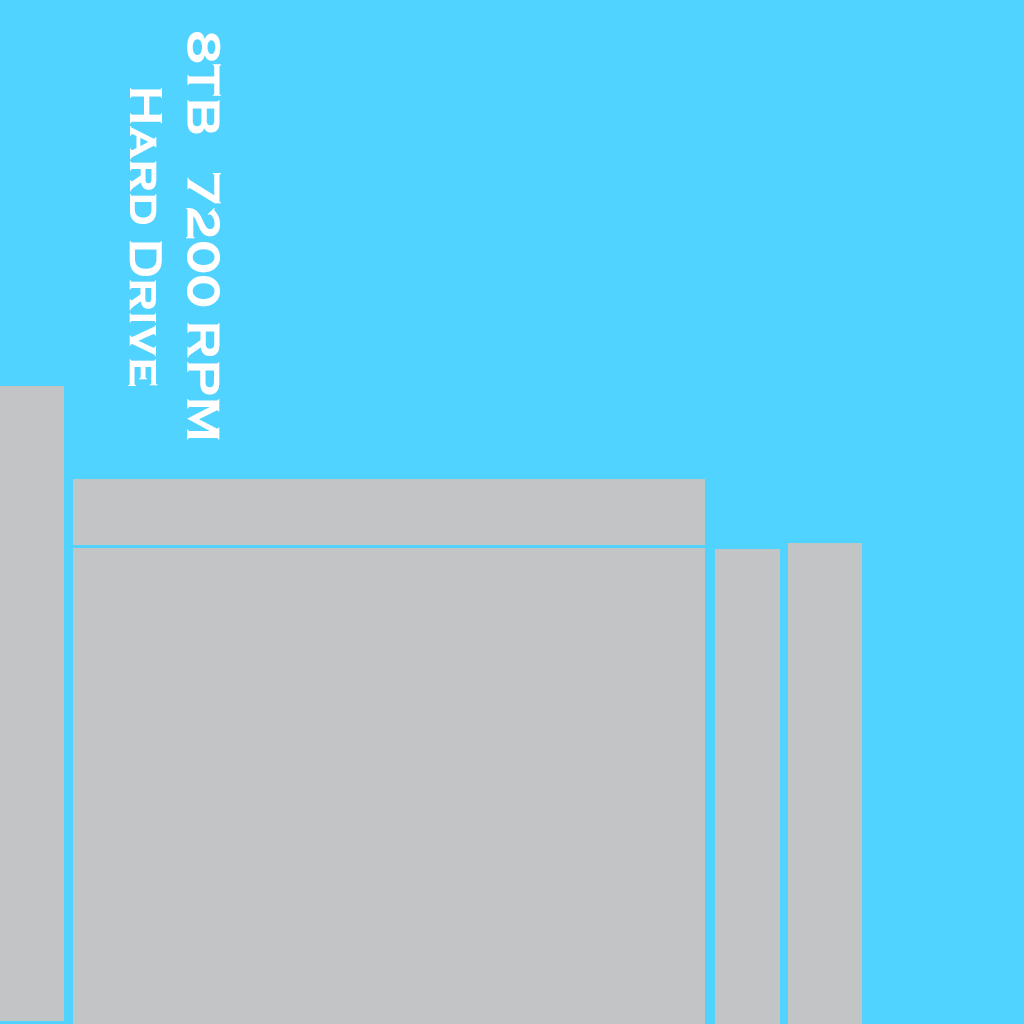
<style>
.page{position:relative;width:1024px;height:1024px;background:#50d4ff}
.page>*{position:absolute;margin:0}
.t1{font:48px "CopperplateGothic-Bold";color:#ffffff}
</style>
<div class="page">
<p class="t1" style="left:128px;top:32px;width:93px;height:408px;text-align:center;rotate:90deg">8TB   7200 RPM<br>Hard Drive</p>
</div>
